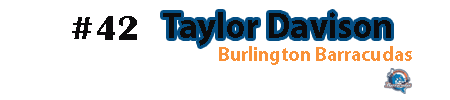
<style>
.page{position:relative;width:450px;height:100px;background:#ffffff}
.page>*{position:absolute;margin:0}
.t1{font:36px "BritannicBold";color:#0c0b0c}
.t2{font:36px "MyriadPro-Bold";color:#0c0b0c}
.t3{font:20px "MyriadPro-Bold";color:#f99138}
</style>
<div class="page">
<p class="t1" style="left:72px;top:16px;width:65px;height:24px">#42</p>
<p class="t2" style="left:163px;top:12px;width:228px;height:34px">Taylor Davison</p>
<p class="t3" style="left:219px;top:46px;width:193px;height:19px">Burlington Barracudas</p>
</div>
